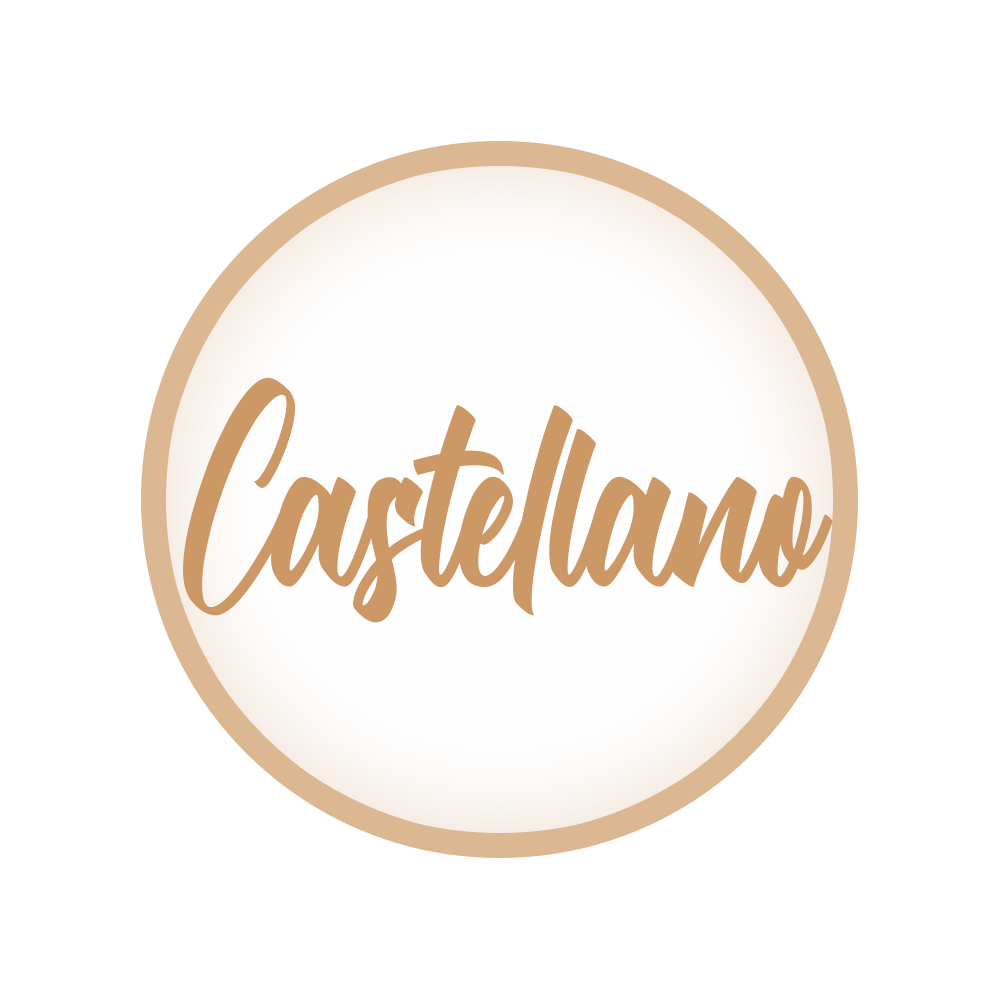
<style>
.page{position:relative;width:1000px;height:1000px;background:#ffffff}
.page>*{position:absolute;margin:0}
.t1{font:252px "Etalasi";color:#cc9966;scale:0.71 1}
</style>
<div class="page">
<p class="t1" style="left:183px;top:377px;width:650px;height:246px">Castellano</p>
</div>
